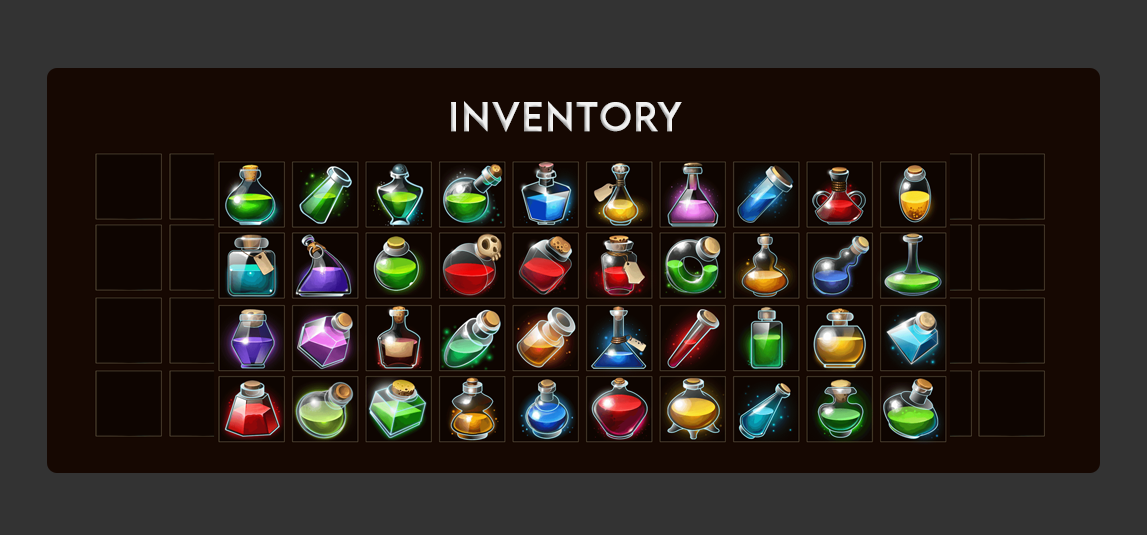
<style>
.page{position:relative;width:1147px;height:535px;background:#333333}
.page>*{position:absolute;margin:0}
.t1{font:52px "LEMONMILK-Regular";letter-spacing:0.05em;color:#ffffff;font-variant:small-caps;font-weight:bold}
</style>
<div class="page">
<p class="t1" style="left:451px;top:101px;width:231px;height:31px">inventory</p>
</div>
